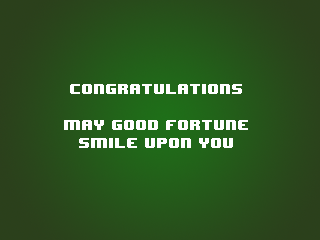
<style>
.page{position:relative;width:320px;height:240px}
.page>*{position:absolute;margin:0}
.t1{font:12px/18px "8BITWONDERNominal";color:#ffffff}
</style>
<div class="page">
<p class="t1" style="left:64px;top:84px;width:184px;height:64px;text-align:center">congratulations<br><br>may good fortune<br>smile upon you</p>
</div>
